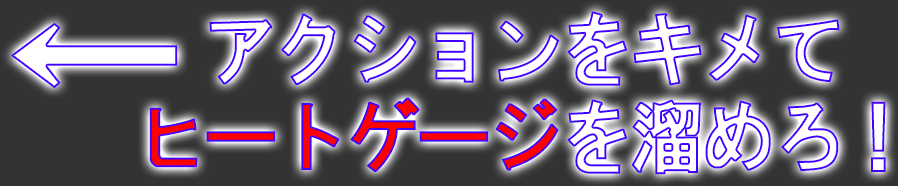
<style>
.page{position:relative;width:898px;height:186px;background:#333333}
.page>*{position:absolute;margin:0}
.t1{font:80px "HGSGothicE";letter-spacing:-0.07em;font-weight:bold;scale:0.93 1}
.t2{font:179.4px "HGSGothicE";letter-spacing:-0.07em;color:#ffffff;font-weight:bold}
</style>
<div class="page">
<p class="t1" style="left:149px;top:11px;width:737px;height:164px;text-align:center">アクションをキメて<br>ヒートゲージを溜めろ！</p>
<p class="t2" style="left:11px;top:22px;width:167px;height:67px">←</p>
</div>
